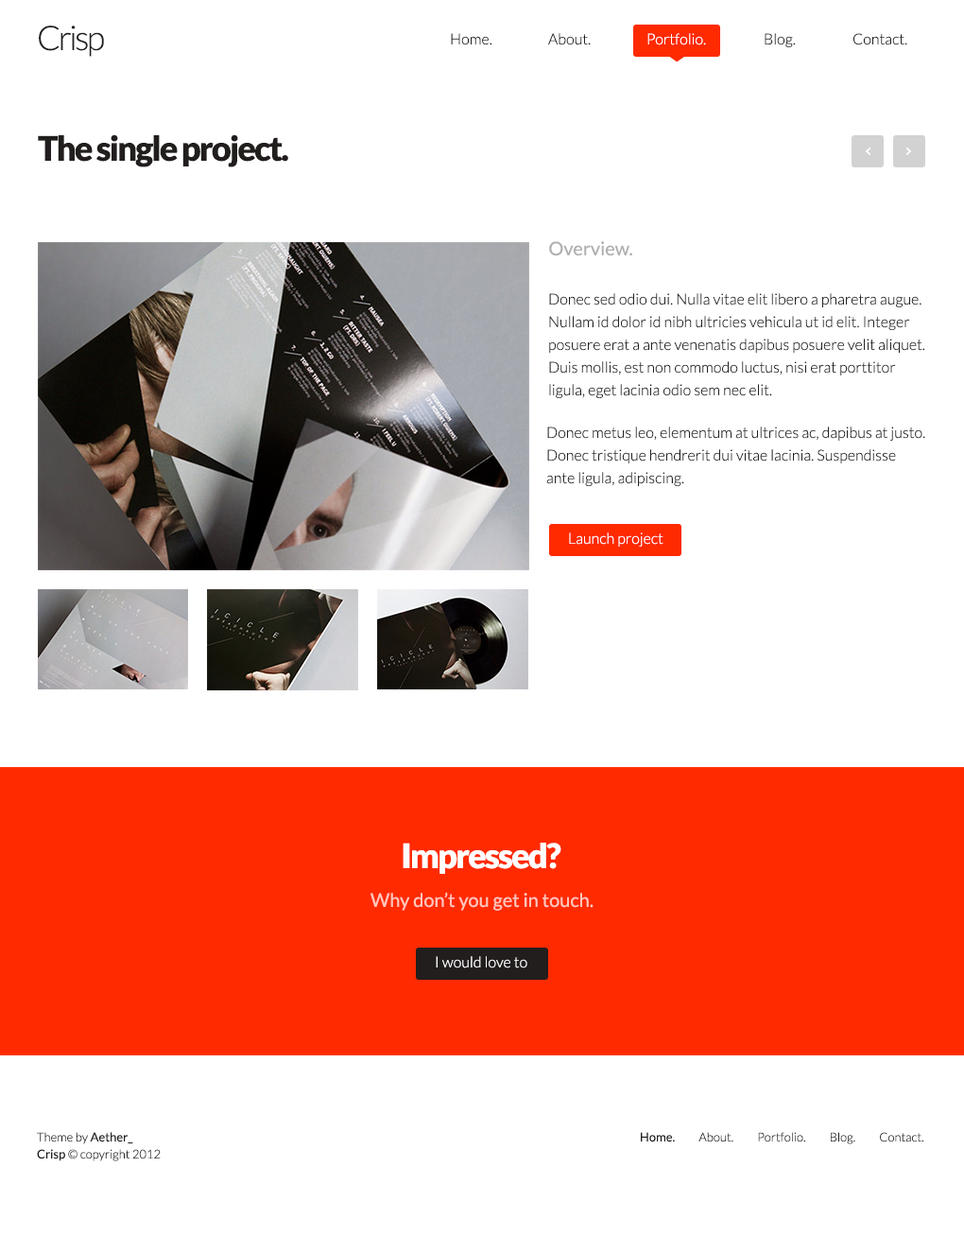
<style>
.page{position:relative;width:964px;height:1237px;background:#ffffff}
.page>*{position:absolute;margin:0}
.t1{font:34px "Lato-Light";letter-spacing:-0.075em;color:#221e1e}
.t2{font:15.1px "Lato-Light";color:#221e1e}
.t3{font:15.1px "Lato-Light";color:#ffffff}
.t4{font:34px "Lato-Black";letter-spacing:-0.05em;color:#221e1e}
.t5{font:18.9px "Lato-Regular";color:#b0b0b0}
.t6{font:15.1px/22.7px "Lato-Light";color:#221e1e}
.t7{font:34px "Lato-Black";letter-spacing:-0.05em;color:#ffffff}
.t8{font:18.9px "Lato-Regular";color:#ffc6bb}
.t9{font:12.3px/17px "Lato-Light";color:#221e1e}
.t10{font:12.3px/17px "Lato-Regular";color:#221e1e}
.t11{font:12.3px "Lato-Light";color:#221e1e}
.t12{font:12.3px "Lato-Regular";color:#221e1e}
</style>
<div class="page">
<p class="t1" style="left:39px;top:26px;width:65px;height:31px">Crisp</p>
<p class="t2" style="left:451px;top:33px;width:41px;height:12px">Home.</p>
<p class="t2" style="left:548px;top:33px;width:43px;height:12px">About.</p>
<p class="t3" style="left:648px;top:33px;width:58px;height:12px">Portfolio.</p>
<p class="t2" style="left:765px;top:33px;width:31px;height:14px">Blog.</p>
<p class="t2" style="left:853px;top:33px;width:55px;height:12px">Contact.</p>
<p class="t4" style="left:38px;top:134px;width:250px;height:33px">The single project.</p>
<p class="t5" style="left:549px;top:241px;width:83px;height:15px">Overview.</p>
<p class="t6" style="left:549px;top:293px;width:377px;height:105px">Donec sed odio dui. Nulla vitae elit libero a pharetra augue. <br>Nullam id dolor id nibh ultricies vehicula ut id elit. Integer <br>posuere erat a ante venenatis dapibus posuere velit aliquet. <br>Duis mollis, est non commodo luctus, nisi erat porttitor <br>ligula, eget lacinia odio sem nec elit.</p>
<p class="t6" style="left:546px;top:426px;width:380px;height:60px">Donec metus leo, elementum at ultrices ac, dapibus at justo. <br>Donec tristique hendrerit dui vitae lacinia. Suspendisse <br>ante ligula, adipiscing.</p>
<p class="t3" style="left:569px;top:532px;width:95px;height:14px">Launch project</p>
<p class="t7" style="left:403px;top:842px;width:159px;height:32px">Impressed?</p>
<p class="t8" style="left:371px;top:892px;width:223px;height:18px">Why don’t you get in touch.</p>
<p class="t3" style="left:436px;top:956px;width:92px;height:12px">I would love to</p>
<p class="t9" style="left:37px;top:1132px;width:124px;height:29px">Theme by <span class="t10">Aether_<br>Crisp </span>© copyright 2012</p>
<p class="t11" style="left:641px;top:1132px;width:283px;height:12px"><span class="t12">Home.          </span>About.          Portfolio.          Blog.          Contact.</p>
</div>
